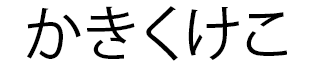
<style>
.page{position:relative;width:320px;height:64px;background:#ffffff}
.page>*{position:absolute;margin:0}
.t1{font:60px "KozGoPr6N-Regular";color:#000000}
</style>
<div class="page">
<p class="t1" style="left:27px;top:6px;width:260px;height:55px">かきくけこ</p>
</div>
